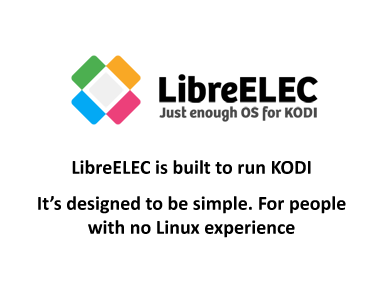
<style>
.page{position:relative;width:387px;height:291px;background:#ffffff}
.page>*{position:absolute;margin:0}
.t1{font:20px "Calibri-Bold";color:#000000}
</style>
<div class="page">
<p class="t1" style="left:38px;top:160px;width:308px;height:78px;text-align:center">LibreELEC is built to run KODI<br><br>It’s designed to be simple. For people<br>with no Linux experience</p>
</div>
